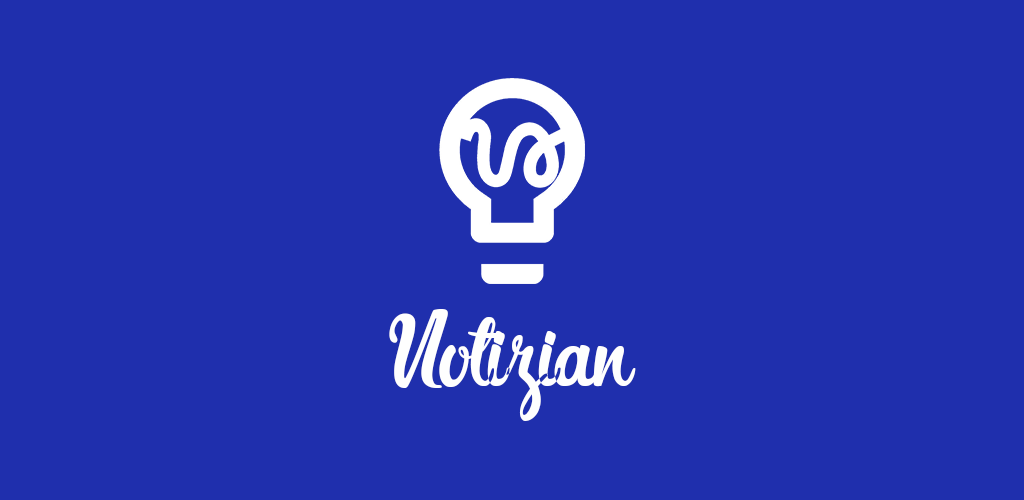
<style>
.page{position:relative;width:1024px;height:500px;background:#1f2fad}
.page>*{position:absolute;margin:0}
.t1{font:132px "Blanche-de-la-Fontaine";color:#fefefe}
</style>
<div class="page">
<p class="t1" style="left:389px;top:309px;width:247px;height:112px">Notizian</p>
</div>
